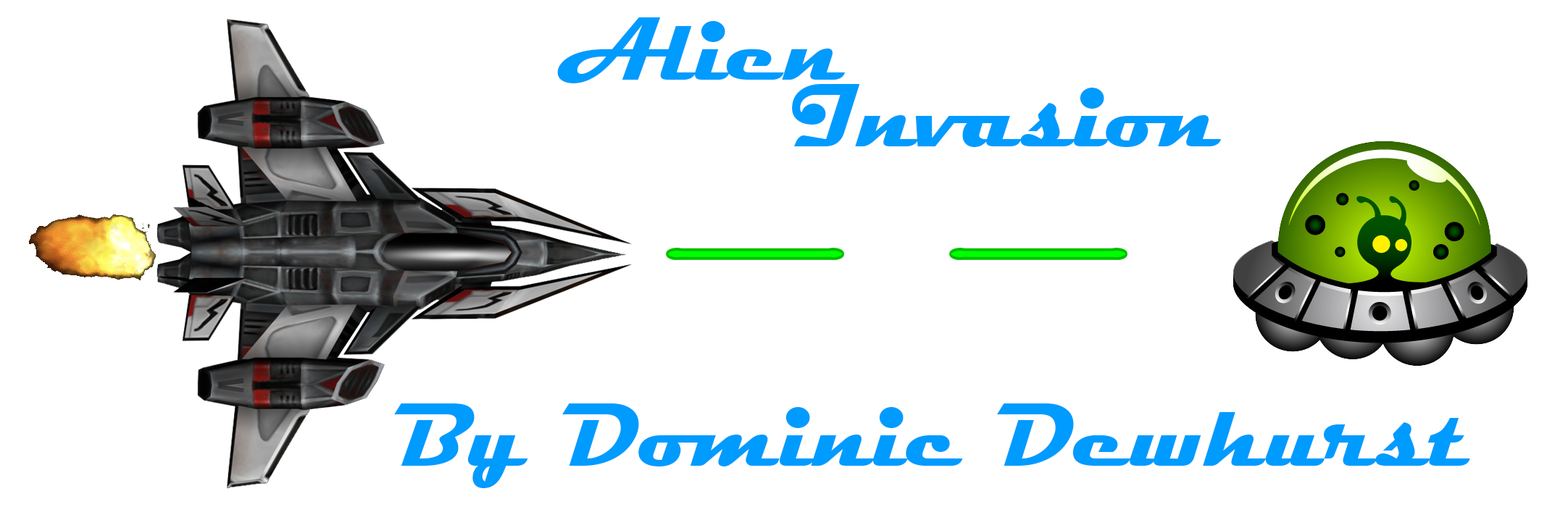
<style>
.page{position:relative;width:1568px;height:507px;background:#ffffff}
.page>*{position:absolute;margin:0}
.t1{font:90.6px "Magneto-Bold";color:#009bfe}
</style>
<div class="page">
<p class="t1" style="left:557px;top:17px;width:289px;height:66px">Alien</p>
<p class="t1" style="left:792px;top:84px;width:430px;height:63px">Invasion</p>
<p class="t1" style="left:394px;top:404px;width:1076px;height:84px">By Dominic Dewhurst</p>
</div>
